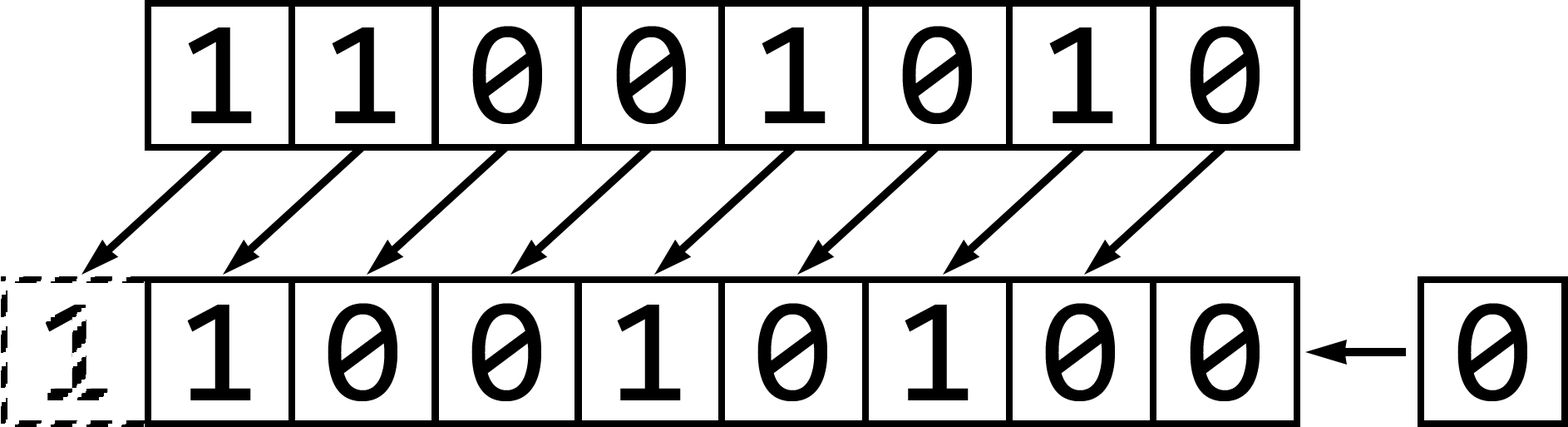
<style>
.page{position:relative;width:1568px;height:427px;background:#ffffff}
.page>*{position:absolute;margin:0}
.t1{font:149px "Consolas";color:#000000}
</style>
<div class="page">
<p class="t1" style="left:188px;top:27px;width:64px;height:96px">1</p>
<p class="t1" style="left:332px;top:27px;width:64px;height:96px">1</p>
<p class="t1" style="left:472px;top:26px;width:70px;height:98px">0</p>
<p class="t1" style="left:616px;top:26px;width:70px;height:98px">0</p>
<p class="t1" style="left:762px;top:27px;width:64px;height:96px">1</p>
<p class="t1" style="left:902px;top:26px;width:70px;height:98px">0</p>
<p class="t1" style="left:1049px;top:27px;width:64px;height:96px">1</p>
<p class="t1" style="left:1190px;top:26px;width:70px;height:98px">0</p>
<p class="t1" style="left:187px;top:304px;width:64px;height:96px">1</p>
<p class="t1" style="left:328px;top:303px;width:69px;height:98px">0</p>
<p class="t1" style="left:471px;top:303px;width:70px;height:98px">0</p>
<p class="t1" style="left:617px;top:304px;width:64px;height:96px">1</p>
<p class="t1" style="left:757px;top:303px;width:70px;height:98px">0</p>
<p class="t1" style="left:905px;top:304px;width:64px;height:96px">1</p>
<p class="t1" style="left:1045px;top:303px;width:70px;height:98px">0</p>
<p class="t1" style="left:1190px;top:303px;width:70px;height:98px">0</p>
<p class="t1" style="left:1457px;top:303px;width:70px;height:98px">0</p>
</div>
